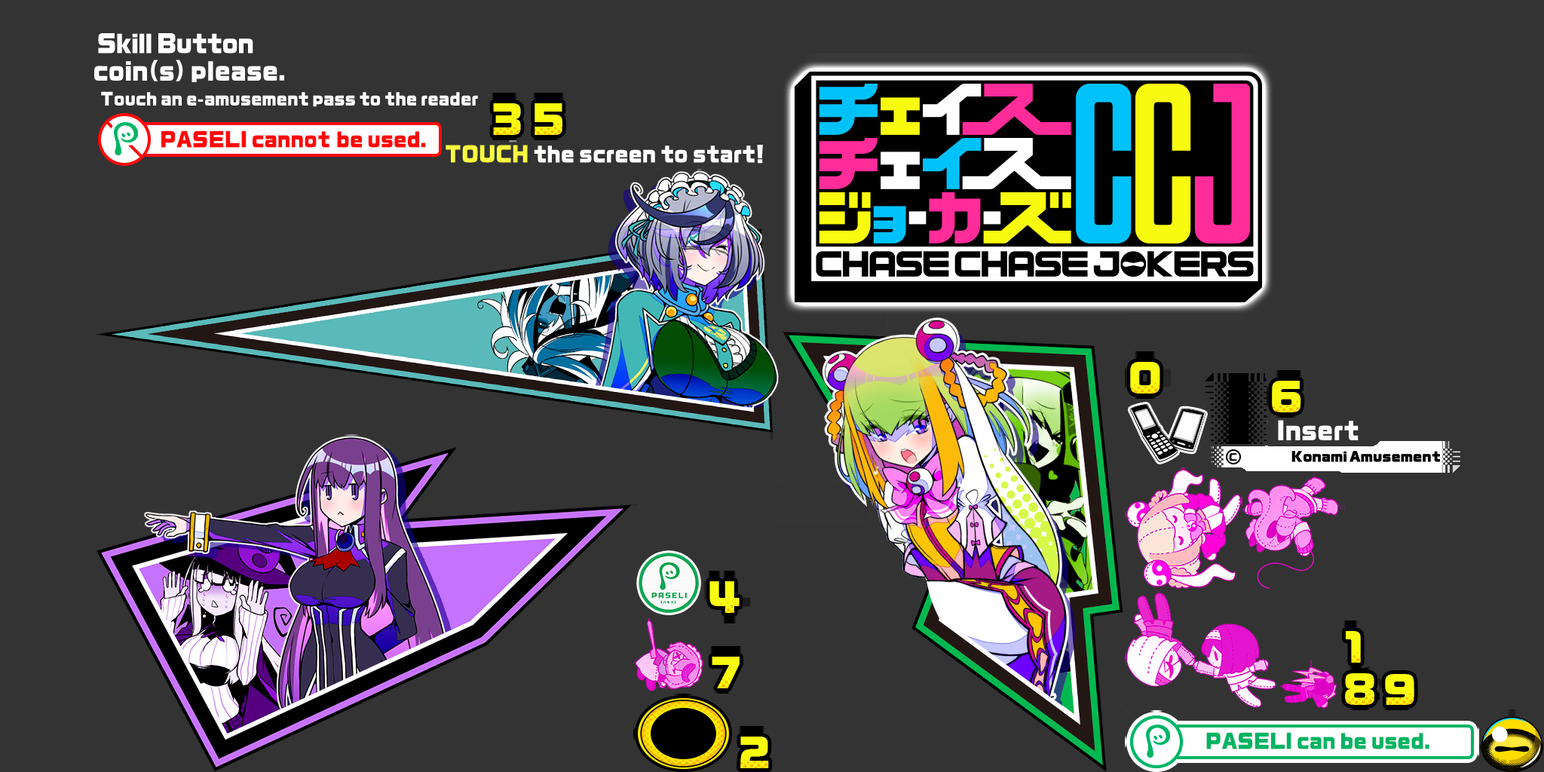
<style>
.page{position:relative;width:1544px;height:772px;background:#333333}
.page>*{position:absolute;margin:0}
.t1{font:23.2px "RgPGSanSrf-UB-83pv-RKSJ-H";letter-spacing:-0.025em;color:#ffffff;scale:0.91 1}
.t2{font:23.2px "RgPGSanSrf-UB-83pv-RKSJ-H";color:#ffffff;scale:0.91 1}
.t3{font:15.8px "RgPGSanSrf-UB-83pv-RKSJ-H";color:#ffffff;scale:0.91 1}
.t4{font:19.1px "RgPGSanSrf-UB-83pv-RKSJ-H";color:#ff0809;scale:0.91 1}
.t5{font:19.9px "RgPGSanSrf-UB-83pv-RKSJ-H";color:#ffffff;scale:0.91 1}
.t6{font:19.9px "RgPGSanSrf-UB-83pv-RKSJ-H";color:#f9fb3e;scale:0.91 1}
.t7{font:19.1px "RgPGSanSrf-UB-83pv-RKSJ-H";color:#00b462;scale:0.91 1}
</style>
<div class="page">
<p class="t1" style="left:98px;top:33px;width:155px;height:21px">Skill Button</p>
<p class="t2" style="left:94px;top:60px;width:190px;height:22px">coin(s) please.</p>
<p class="t3" style="left:101px;top:91px;width:377px;height:16px">Touch an e-amusement pass to the reader</p>
<p class="t4" style="left:161px;top:130px;width:265px;height:18px">PASELI cannot be used.</p>
<p class="t5" style="left:446px;top:145px;width:317px;height:19px"><span class="t6">TOUCH</span> the screen to start!</p>
<p class="t2" style="left:1278px;top:420px;width:81px;height:20px">Insert</p>
<p class="t7" style="left:1206px;top:732px;width:224px;height:18px">PASELI can be used.</p>
</div>
